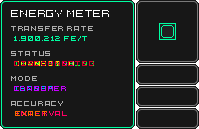
<style>
.page{position:relative;width:199px;height:129px;background:#171717}
.page>*{position:absolute;margin:0}
.t1{font:14.7px "5×5";color:#ffffff}
.t2{font:11.3px "5×5";color:#aeaeae}
.t3{font:11.3px "5×5";color:#00ffa2}
.t4{font:11.3px "5×5"}
.t5{font:11.3px "5×5";color:#da0029}
.t6{font:11.3px "5×5";color:#c600ff}
.t7{font:11.3px "5×5";color:#ff0066}
.t8{font:11.3px "5×5";color:#ff6600}
</style>
<div class="page">
<p class="t1" style="left:11px;top:10px;width:98px;height:7px">ENERGY METER</p>
<p class="t2" style="left:11px;top:26px;width:82px;height:5px">Transfer Rate</p>
<p class="t3" style="left:14px;top:36px;width:73px;height:5px">1.900.212 FE/t</p>
<p class="t2" style="left:11px;top:51px;width:39px;height:5px">STATUS</p>
<p class="t4" style="left:14px;top:61px;width:60px;height:5px">CONSUMING</p>
<p class="t4" style="left:14px;top:61px;width:80px;height:5px">TRANSFERRING</p>
<p class="t4" style="left:14px;top:61px;width:60px;height:5px">CONNECTED</p>
<p class="t5" style="left:14px;top:61px;width:80px;height:5px">DISCONNECTED</p>
<p class="t2" style="left:11px;top:76px;width:26px;height:5px">MODE</p>
<p class="t6" style="left:14px;top:86px;width:52px;height:5px">TRANSFER</p>
<p class="t6" style="left:14px;top:86px;width:52px;height:5px">CONSUMER</p>
<p class="t2" style="left:11px;top:101px;width:52px;height:5px">ACCURACY</p>
<p class="t7" style="left:15px;top:111px;width:52px;height:5px">INTERVAL</p>
<p class="t8" style="left:15px;top:111px;width:32px;height:5px">EXACT</p>
</div>
